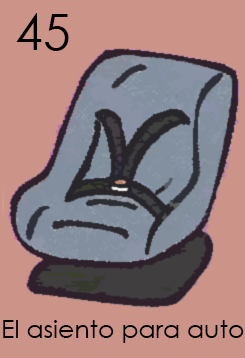
<style>
.page{position:relative;width:245px;height:358px;background:#cc9389}
.page>*{position:absolute;margin:0}
.t1{font:50px "CenturyGothic";color:#000000}
.t2{font:25px "CenturyGothic";color:#000000}
</style>
<div class="page">
<p class="t1" style="left:16px;top:13px;width:53px;height:38px">45</p>
<p class="t2" style="left:3px;top:320px;width:241px;height:23px">El asiento para auto</p>
</div>
